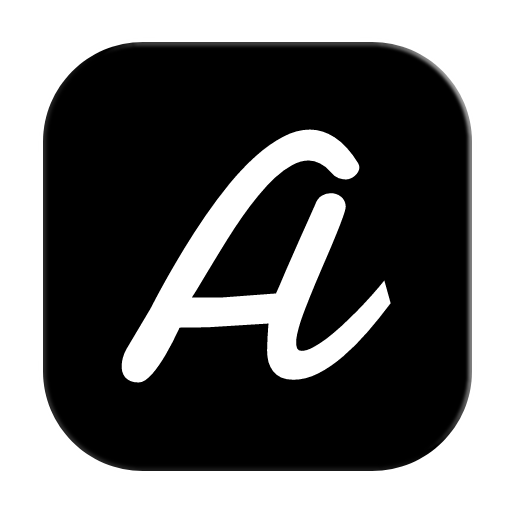
<style>
.page{position:relative;width:512px;height:512px;background:#000000}
.page>*{position:absolute;margin:0}
.t1{font:350px "Damion";color:#ffffff}
</style>
<div class="page">
<p class="t1" style="left:121px;top:129px;width:270px;height:254px">A</p>
</div>
